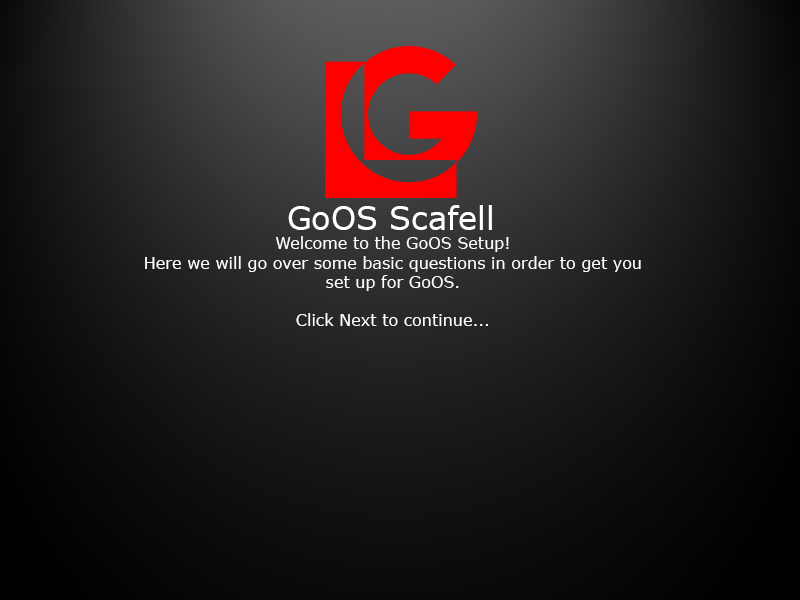
<style>
.page{position:relative;width:800px;height:600px}
.page>*{position:absolute;margin:0}
.t1{font:32px "MSReferenceSansSerif";color:#ffffff}
.t2{font:16px "MSReferenceSansSerif";color:#ffffff}
</style>
<div class="page">
<p class="t1" style="left:288px;top:205px;width:204px;height:25px">GoOS Scafell</p>
<p class="t2" style="left:145px;top:236px;width:496px;height:90px;text-align:center">Welcome to the GoOS Setup!<br>Here we will go over some basic questions in order to get you<br>set up for GoOS.<br><br>Click Next to continue...</p>
</div>
